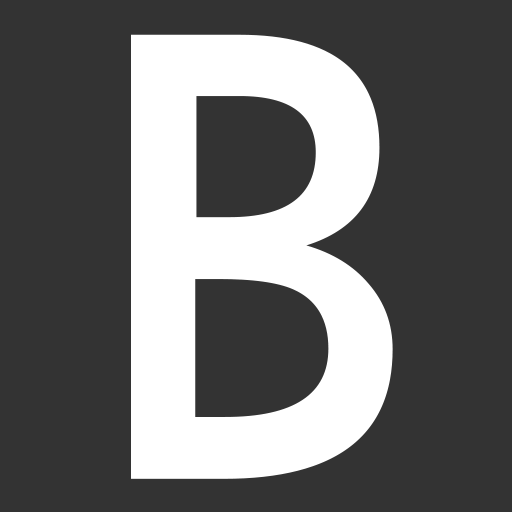
<style>
.page{position:relative;width:512px;height:512px;background:#333333}
.page>*{position:absolute;margin:0}
.t1{font:600px "JejuGothic";color:#ffffff}
</style>
<div class="page">
<p class="t1" style="left:131px;top:34px;width:262px;height:445px">B</p>
</div>
